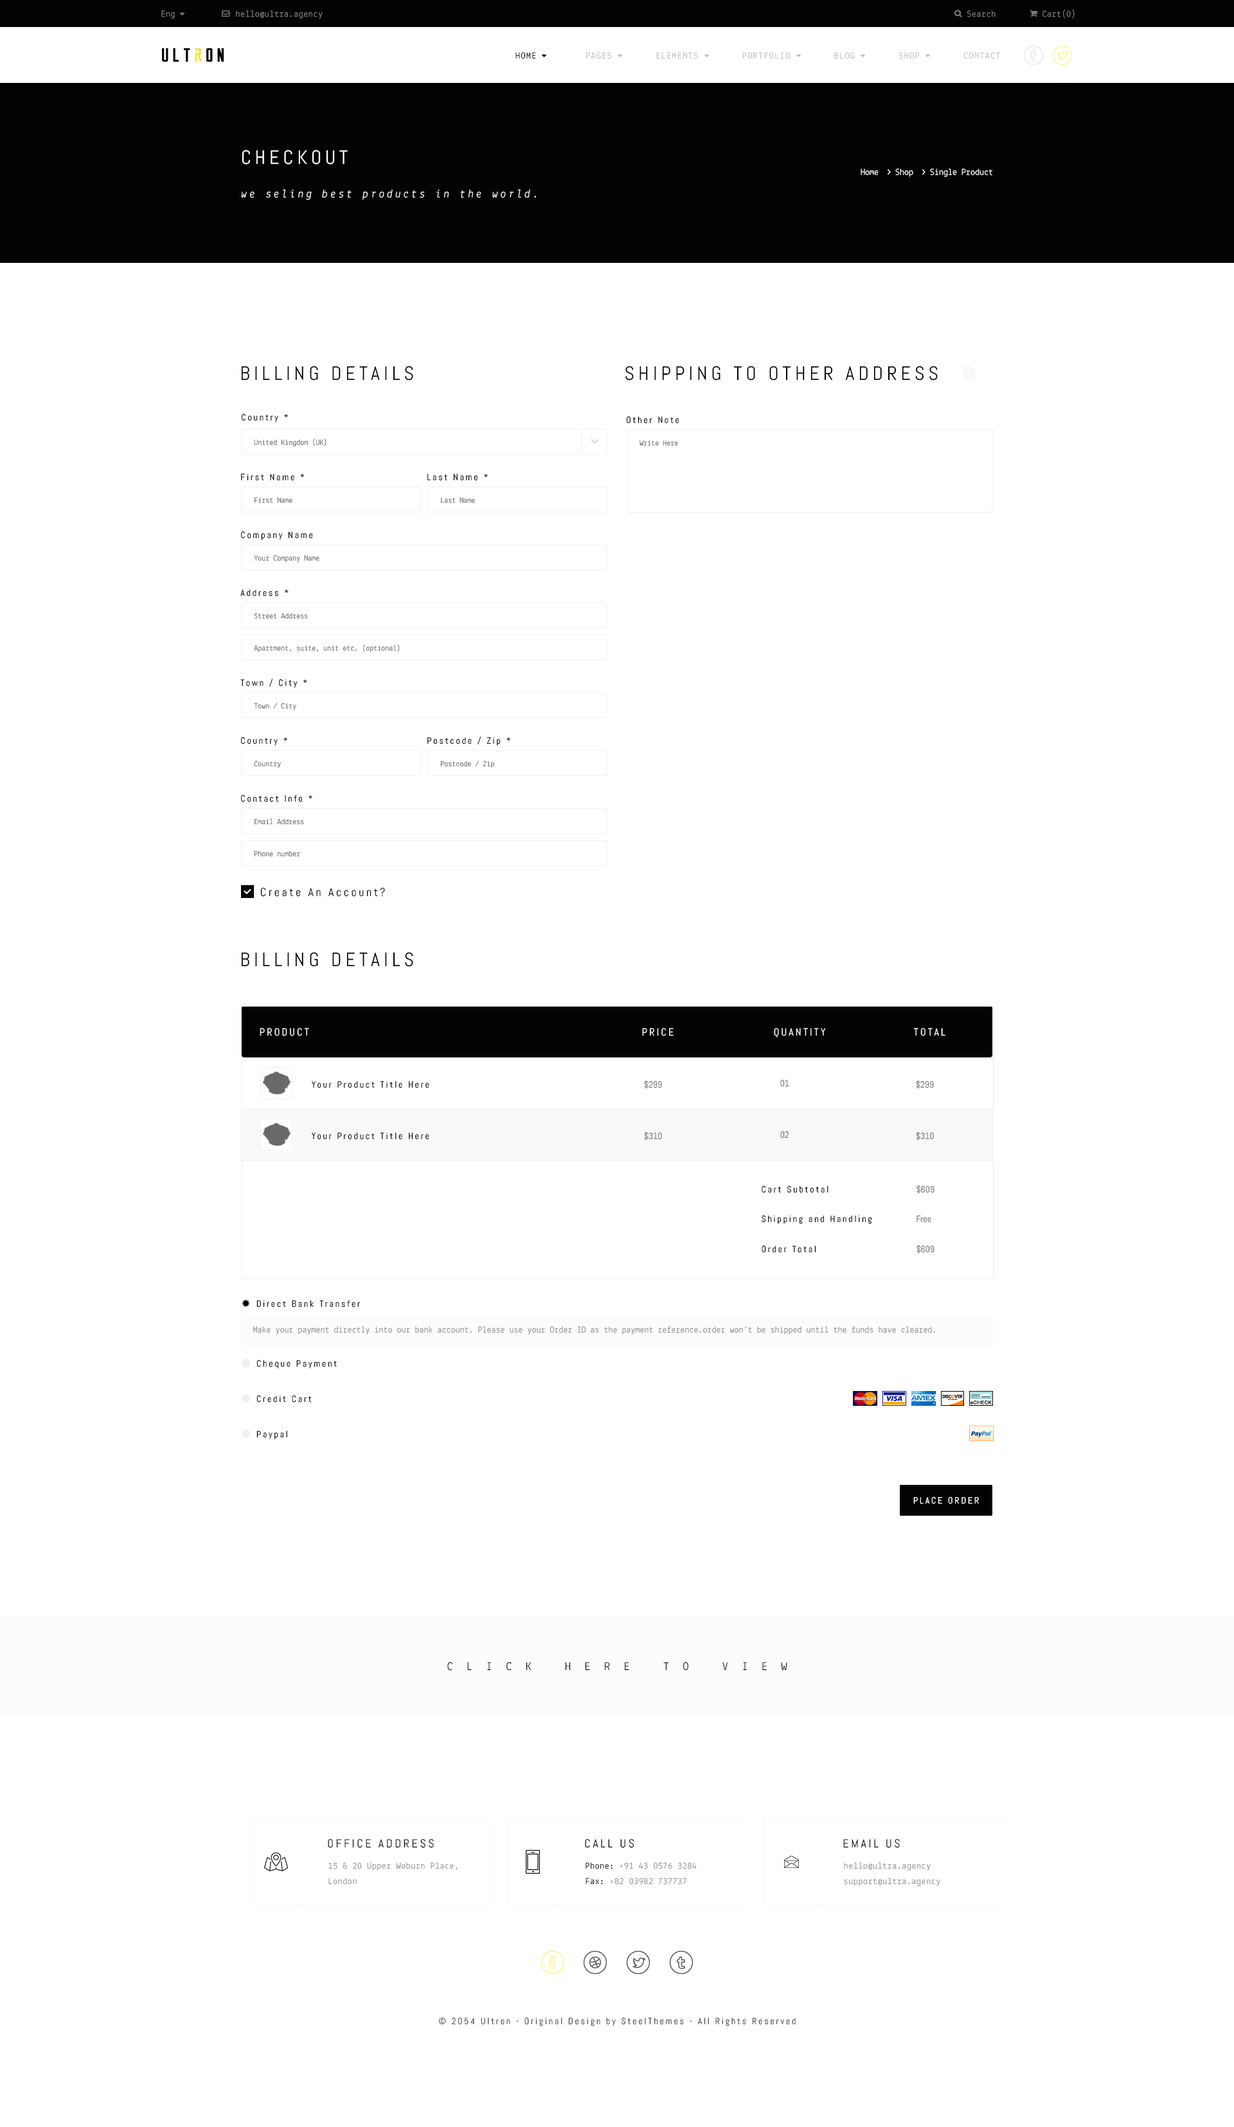
<style>
.page{position:relative;width:1234px;height:2127px;background:#ffffff}
.page>*{position:absolute;margin:0}
.t1{font:9px "Lekton-Regular";letter-spacing:0.04em;color:#787878}
.t2{font:9px "Lekton-Regular";letter-spacing:0.1em;color:#bfbfbf;text-transform:uppercase}
.t3{font:9px "Lekton-Regular";letter-spacing:0.1em;color:#030303;text-transform:uppercase}
.t4{font:19.3px "Abel-Regular";letter-spacing:0.2em;color:#ffffff;text-transform:uppercase}
.t5{font:11.6px "Lekton-Italic";letter-spacing:0.2em;color:#ffffff}
.t6{font:19.3px "Abel-Regular";letter-spacing:0.2em;color:#030303;text-transform:uppercase}
.t7{font:9px "Abel-Regular";letter-spacing:0.2em;color:#030303}
.t8{font:7.7px "Lekton-Regular";color:#787878}
.t9{font:11.6px "Abel-Regular";letter-spacing:0.2em;color:#030303}
.t10{font:10.3px "Abel-Regular";letter-spacing:0.2em;color:#ffffff}
.t11{font:9px "Abel-Regular";color:#787878}
.t12{font:9px/29.9px "Abel-Regular";letter-spacing:0.2em;color:#030303}
.t13{font:9px/29.9px "Abel-Regular";color:#787878}
.t14{font:9px "Lekton-Regular";color:#8e8e8e}
.t15{font:9px "Abel-Regular";letter-spacing:0.2em;color:#ffffff;text-transform:uppercase}
.t16{font:11.6px "Lekton-Regular";letter-spacing:1.2em;color:#030303;text-transform:uppercase}
.t17{font:11.6px "Abel-Regular";letter-spacing:0.2em;color:#030303;text-transform:uppercase}
.t18{font:9px/15.4px "Lekton-Regular";letter-spacing:0.04em;color:#969595}
.t19{font:9px/15.4px "Lekton-Regular";letter-spacing:0.04em;color:#030303}
.t20{font:9px "Abel-Regular";letter-spacing:0.2em;color:#4f4f4f}
</style>
<div class="page">
<p class="t1" style="left:161px;top:10px;width:14px;height:9px">Eng</p>
<p class="t1" style="left:236px;top:10px;width:87px;height:9px">hello@ultra.agency</p>
<p class="t1" style="left:968px;top:10px;width:28px;height:7px">Search</p>
<p class="t1" style="left:1043px;top:9px;width:32px;height:10px">Cart(0)</p>
<p class="t2" style="left:516px;top:52px;width:484px;height:7px"><span class="t3">Home         </span>Pages        Elements        Portfolio        Blog        Shop        Contact</p>
<p class="t4" style="left:242px;top:150px;width:106px;height:15px">checkout</p>
<p class="t5" style="left:241px;top:189px;width:295px;height:11px">we seling best products in the world.</p>
<p class="t6" style="left:241px;top:366px;width:172px;height:15px">Billing Details</p>
<p class="t6" style="left:626px;top:366px;width:312px;height:15px">Shipping to other address</p>
<p class="t7" style="left:242px;top:413px;width:46px;height:9px">Country *</p>
<p class="t7" style="left:627px;top:416px;width:53px;height:8px">Other Note</p>
<p class="t8" style="left:254px;top:438px;width:73px;height:9px">United Kingdom (UK)</p>
<p class="t8" style="left:640px;top:440px;width:38px;height:6px">Write Here</p>
<p class="t7" style="left:241px;top:474px;width:64px;height:7px">First Name *</p>
<p class="t7" style="left:428px;top:474px;width:60px;height:7px">Last Name *</p>
<p class="t8" style="left:255px;top:497px;width:37px;height:6px">First Name</p>
<p class="t8" style="left:441px;top:498px;width:34px;height:5px">Last Name</p>
<p class="t7" style="left:241px;top:531px;width:72px;height:9px">Company Name</p>
<p class="t8" style="left:254px;top:555px;width:66px;height:7px">Your Company Name</p>
<p class="t7" style="left:240px;top:590px;width:49px;height:7px">Address *</p>
<p class="t8" style="left:254px;top:613px;width:54px;height:6px">Street Address</p>
<p class="t8" style="left:254px;top:644px;width:146px;height:8px">Apartment, suite, unit etc. (optional)</p>
<p class="t7" style="left:240px;top:679px;width:67px;height:9px">Town / City *</p>
<p class="t8" style="left:254px;top:703px;width:42px;height:7px">Town / City</p>
<p class="t7" style="left:241px;top:737px;width:46px;height:9px">Country *</p>
<p class="t7" style="left:428px;top:737px;width:82px;height:9px">Postcode / Zip *</p>
<p class="t8" style="left:254px;top:760px;width:27px;height:8px">Country</p>
<p class="t8" style="left:440px;top:760px;width:54px;height:8px">Postcode / Zip</p>
<p class="t7" style="left:241px;top:795px;width:71px;height:7px">Contact Info *</p>
<p class="t8" style="left:255px;top:818px;width:49px;height:7px">Email Address</p>
<p class="t8" style="left:254px;top:851px;width:46px;height:6px">Phone number</p>
<p class="t9" style="left:260px;top:888px;width:125px;height:9px">Create An Account?</p>
<p class="t6" style="left:241px;top:952px;width:172px;height:15px">Billing Details</p>
<p class="t10" style="left:260px;top:1028px;width:49px;height:8px">PRODUCT</p>
<p class="t10" style="left:642px;top:1028px;width:32px;height:8px">PRICE</p>
<p class="t10" style="left:774px;top:1028px;width:51px;height:10px">QUANTITY</p>
<p class="t10" style="left:914px;top:1028px;width:32px;height:8px">TOTAL</p>
<p class="t7" style="left:312px;top:1081px;width:117px;height:7px">Your Product Title Here</p>
<p class="t11" style="left:644px;top:1080px;width:18px;height:9px">$299</p>
<p class="t11" style="left:780px;top:1079px;width:9px;height:8px">01</p>
<p class="t11" style="left:916px;top:1080px;width:18px;height:9px">$299</p>
<p class="t7" style="left:312px;top:1133px;width:117px;height:7px">Your Product Title Here</p>
<p class="t11" style="left:644px;top:1131px;width:18px;height:9px">$310</p>
<p class="t11" style="left:780px;top:1131px;width:9px;height:7px">02</p>
<p class="t11" style="left:916px;top:1131px;width:18px;height:9px">$310</p>
<p class="t12" style="left:762px;top:1185px;width:110px;height:68px">Cart Subtotal<br>Shipping and Handling<br>Order Total</p>
<p class="t13" style="left:917px;top:1185px;width:18px;height:69px">$609<br>Free<br>$609</p>
<p class="t7" style="left:256px;top:1300px;width:104px;height:8px">Direct Bank Transfer</p>
<p class="t14" style="left:253px;top:1326px;width:682px;height:9px">Make your payment directly into our bank account. Please use your Order ID as the payment reference.order won’t be shipped until the funds have cleared.</p>
<p class="t7" style="left:256px;top:1360px;width:81px;height:9px">Cheque Payment</p>
<p class="t7" style="left:256px;top:1395px;width:56px;height:8px">Credit Cart</p>
<p class="t7" style="left:256px;top:1431px;width:31px;height:8px">Paypal</p>
<p class="t15" style="left:914px;top:1497px;width:65px;height:7px">Place Order</p>
<p class="t16" style="left:447px;top:1662px;width:341px;height:9px">Click here to view</p>
<p class="t17" style="left:328px;top:1839px;width:106px;height:9px">Office Address</p>
<p class="t17" style="left:585px;top:1839px;width:49px;height:9px">Call us</p>
<p class="t17" style="left:843px;top:1839px;width:57px;height:9px">Email us</p>
<p class="t18" style="left:328px;top:1862px;width:130px;height:23px">15 &amp; 20 Upper Woburn Place,<br>London</p>
<p class="t18" style="left:586px;top:1862px;width:111px;height:23px"><span class="t19">Phone:</span> +91 43 0576 3284<br><span class="t19">Fax:</span> +82 03982 737737</p>
<p class="t18" style="left:844px;top:1862px;width:97px;height:24px">hello@ultra.agency<br>support@ultra.agency</p>
<p class="t20" style="left:438px;top:2017px;width:358px;height:9px">© 2054 Ultron - Original Design by SteelThemes - All Rights Reserved</p>
</div>
